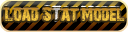
<style>
.page{position:relative;width:128px;height:32px}
.page>*{position:absolute;margin:0}
.t1{font:18.9px "28DaysLater";scale:0.91 1}
</style>
<div class="page">
<p class="t1" style="left:5px;top:7px;width:46px;height:15px">Load S</p>
<p class="t1" style="left:53px;top:7px;width:7px;height:13px">t</p>
<p class="t1" style="left:61px;top:7px;width:63px;height:15px">at Model</p>
</div>
